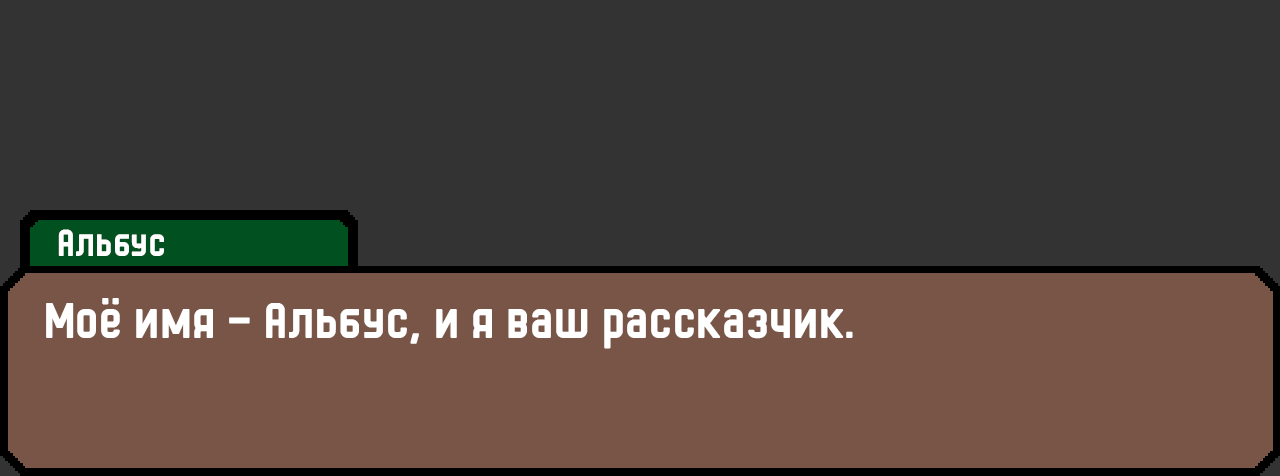
<style>
.page{position:relative;width:1280px;height:476px;background:#333333}
.page>*{position:absolute;margin:0}
.t1{font:36px "HermanoMayor";color:#ffffff}
.t2{font:48px "HermanoMayor";color:#ffffff}
</style>
<div class="page">
<p class="t1" style="left:58px;top:229px;width:106px;height:27px">Альбус</p>
<p class="t2" style="left:46px;top:298px;width:807px;height:51px">Моё имя – Альбус, и я ваш рассказчик.</p>
</div>
